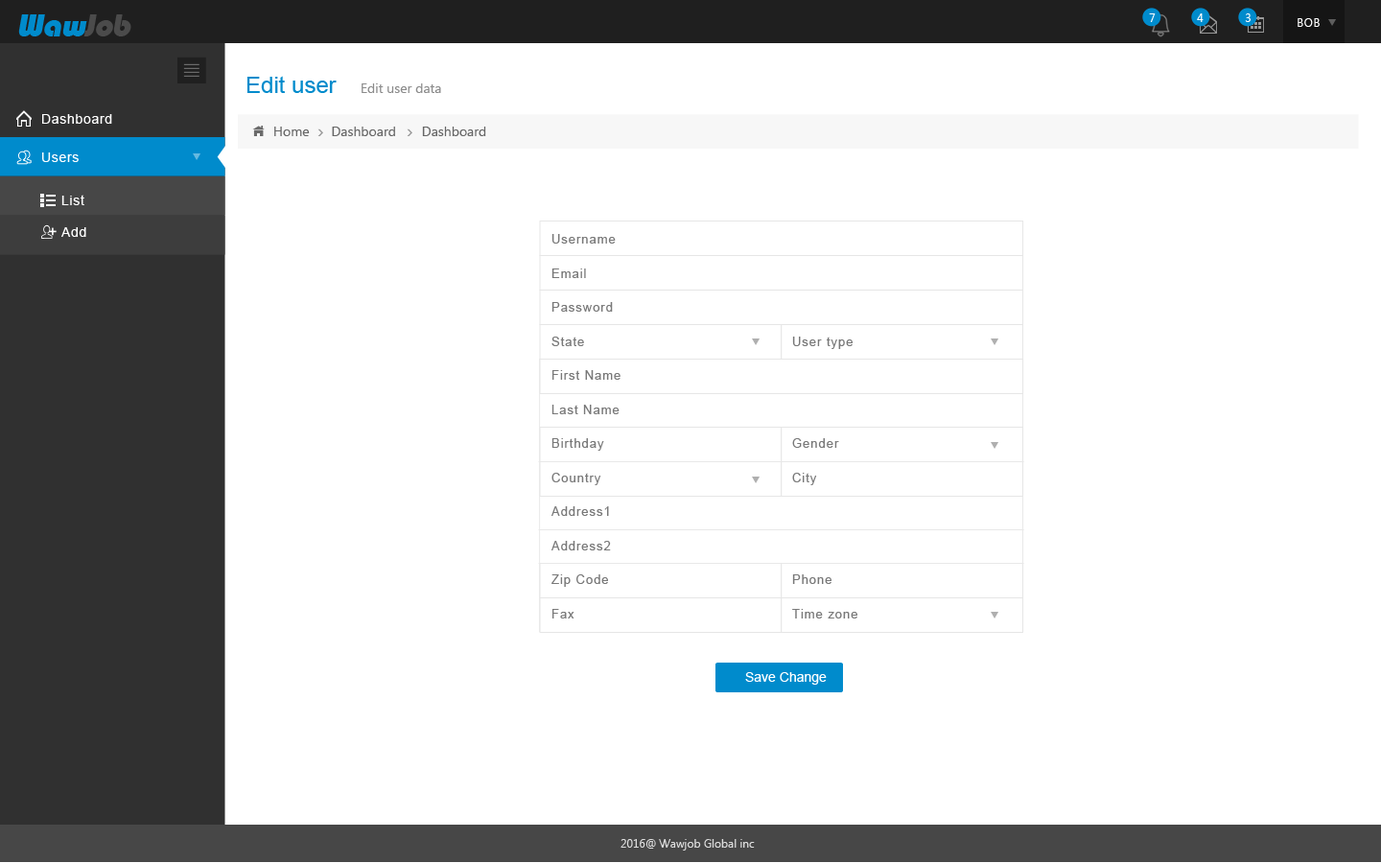
<style>
.page{position:relative;width:1381px;height:863px;background:#ffffff}
.page>*{position:absolute;margin:0}
.t1{font:32.6px "Bauhaus93";letter-spacing:-0.025em;color:#008bcc;font-style:italic}
.t2{font:32.6px "Bauhaus93";letter-spacing:-0.025em;color:#4b4b4b;font-style:italic}
.t3{font:11.5px "LaoUI";color:#ffffff}
.t4{font:11.5px "LaoUI";letter-spacing:0.05em;color:#ffffff}
.t5{font:23px "ArialMT";color:#008bcc}
.t6{font:13.4px "LaoUI";color:#8c8c8c}
.t7{font:13.4px "ArialMT";letter-spacing:0.05em;color:#ffffff}
.t8{font:13.4px "LaoUI";color:#666666}
.t9{font:12.5px/34.1px "ArialMT";letter-spacing:0.075em;color:#797979}
.t10{font:13.4px "ArialMT";color:#ffffff}
.t11{font:11.5px "LaoUI";color:#dedede}
</style>
<div class="page">
<p class="t1" style="left:18px;top:14px;width:113px;height:22px">Waw<span class="t2">Job</span></p>
<p class="t3" style="left:1149px;top:13px;width:7px;height:9px">7</p>
<p class="t3" style="left:1197px;top:13px;width:7px;height:9px">4</p>
<p class="t3" style="left:1245px;top:13px;width:6px;height:9px">3</p>
<p class="t4" style="left:1298px;top:18px;width:22px;height:9px">BOB</p>
<p class="t5" style="left:247px;top:76px;width:90px;height:17px">Edit user</p>
<p class="t6" style="left:362px;top:83px;width:79px;height:10px">Edit user data</p>
<p class="t7" style="left:42px;top:114px;width:70px;height:10px">Dashboard</p>
<p class="t8" style="left:274px;top:127px;width:212px;height:9px">Home      Dashboard       Dashboard</p>
<p class="t7" style="left:42px;top:153px;width:37px;height:9px">Users</p>
<p class="t7" style="left:61px;top:195px;width:23px;height:10px">List</p>
<p class="t7" style="left:61px;top:227px;width:25px;height:10px">Add</p>
<p class="t9" style="left:552px;top:234px;width:69px;height:385px">Username<br>Email<br>Password<br>State                                        <br>First Name<br>Last Name<br>Birthday<br>Country<br>Address1<br>Address2<br>Zip Code<br>Fax</p>
<p class="t9" style="left:792px;top:337px;width:66px;height:282px">User type                                    <br><br><br>Gender<br>City<br><br><br>Phone<br>Time zone</p>
<p class="t10" style="left:745px;top:672px;width:82px;height:13px">Save Change</p>
<p class="t11" style="left:621px;top:839px;width:134px;height:12px">2016@ Wawjob Global inc</p>
</div>
